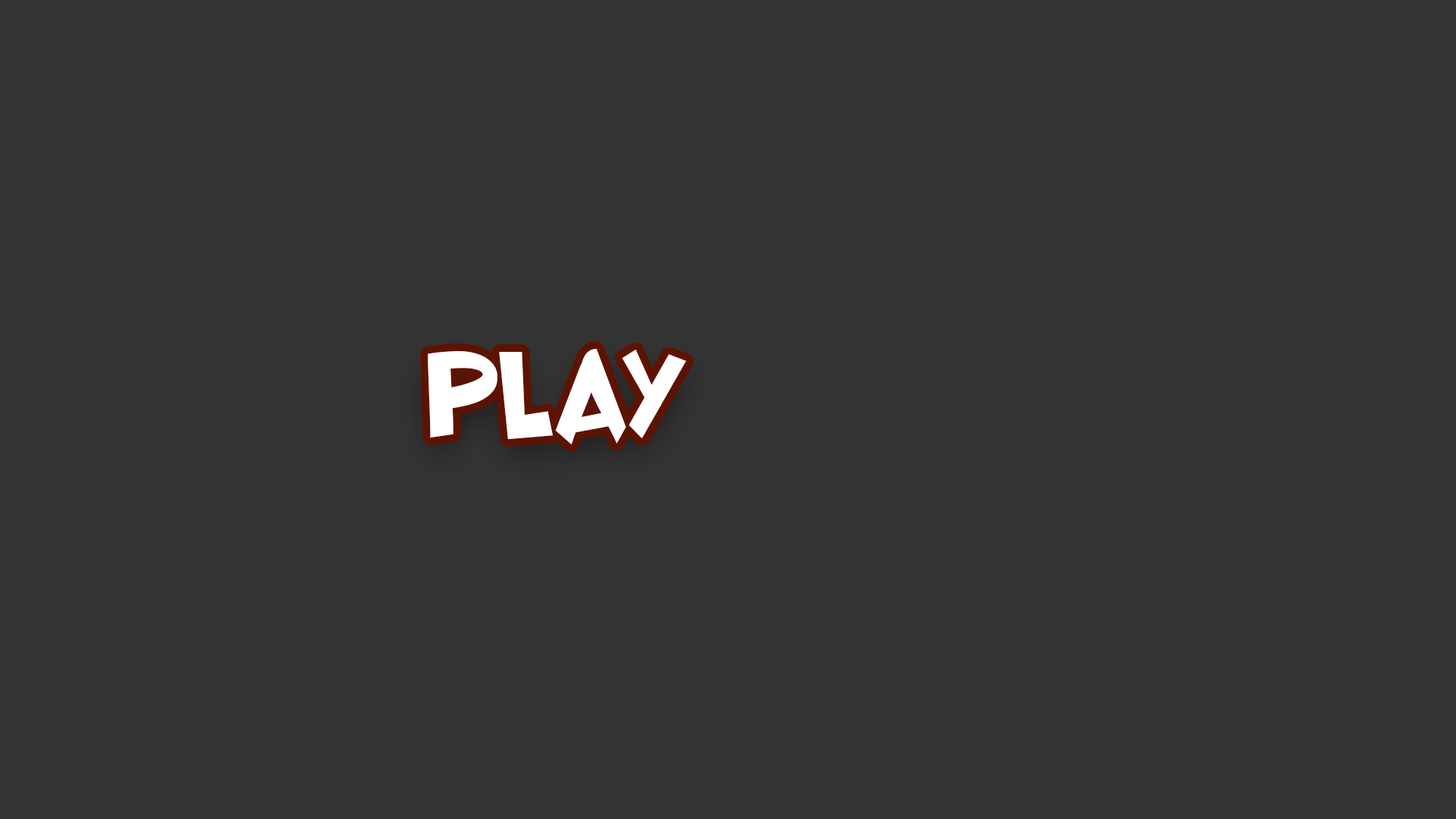
<style>
.page{position:relative;width:1456px;height:819px;background:#333333}
.page>*{position:absolute;margin:0}
.t1{font:136.8px "BLOCKHEADDUDEPersonalUse";color:#ffffff;scale:0.83 1}
</style>
<div class="page">
<p class="t1" style="left:428px;top:349px;width:258px;height:95px">PLay</p>
</div>
